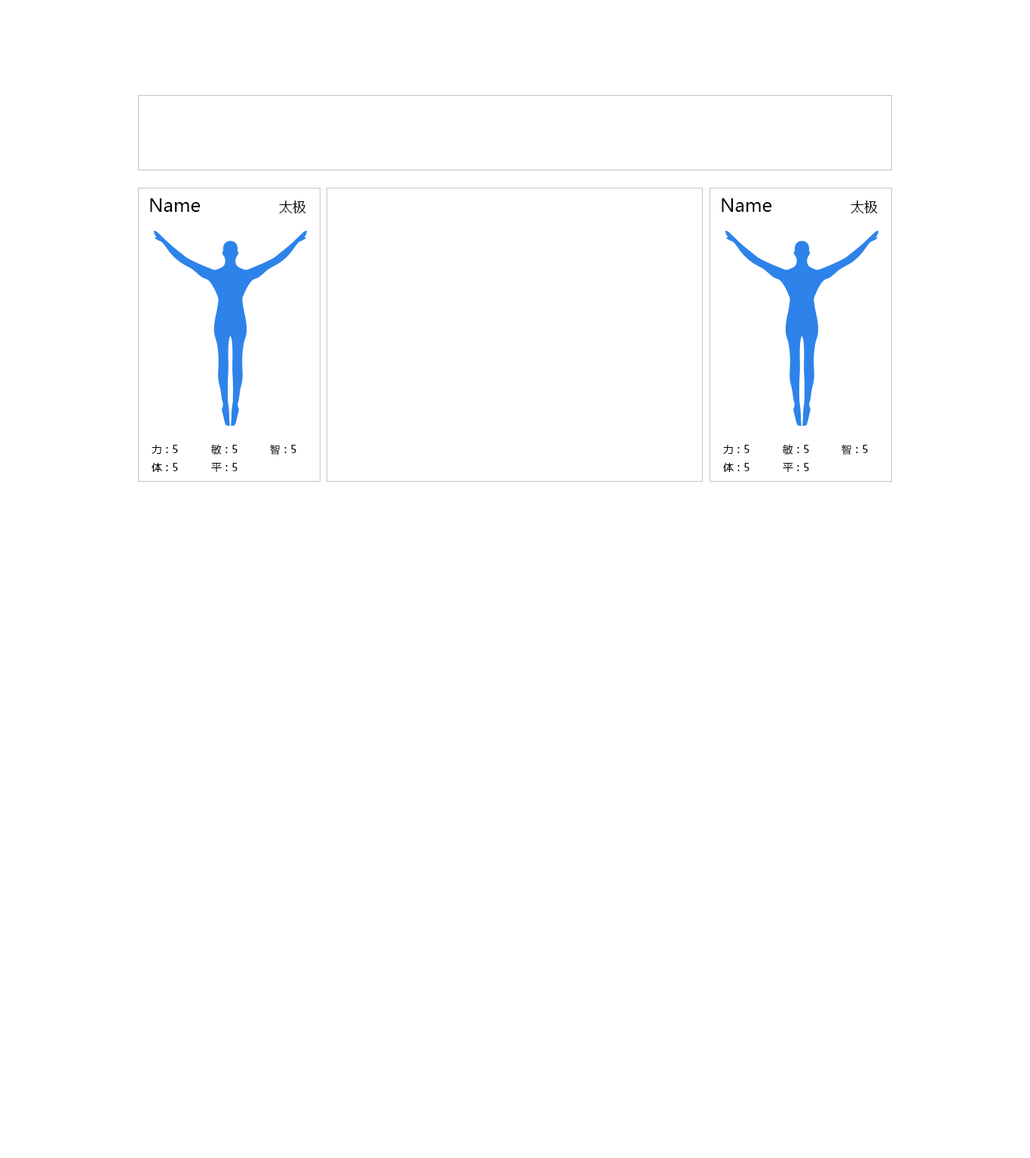
<style>
.page{position:relative;width:1030px;height:1158px;background:#ffffff}
.page>*{position:absolute;margin:0}
.t1{font:18.1px "MicrosoftYaHei";color:#000000}
.t2{font:13.6px "MicrosoftYaHei";color:#000000}
.t3{font:10.3px "MicrosoftYaHei";color:#000000}
.t4{font:10.3px/8.3px "MicrosoftYaHei";color:#000000}
</style>
<div class="page">
<p class="t1" style="left:150px;top:198px;width:51px;height:14px">Name</p>
<p class="t2" style="left:279px;top:201px;width:27px;height:12px">太极</p>
<p class="t1" style="left:721px;top:198px;width:51px;height:14px">Name</p>
<p class="t2" style="left:850px;top:201px;width:28px;height:12px">太极</p>
<p class="t3" style="left:152px;top:445px;width:26px;height:27px">力：5 <br>体：5</p>
<p class="t3" style="left:211px;top:444px;width:26px;height:28px">敏：5<br><span class="t4">平：5</span></p>
<p class="t3" style="left:270px;top:444px;width:26px;height:11px">智：5</p>
<p class="t3" style="left:723px;top:445px;width:26px;height:27px">力：5 <br>体：5</p>
<p class="t3" style="left:783px;top:444px;width:26px;height:28px">敏：5<br><span class="t4">平：5</span></p>
<p class="t3" style="left:841px;top:444px;width:27px;height:11px">智：5</p>
</div>
